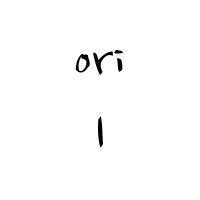
<style>
.page{position:relative;width:200px;height:200px;background:#ffffff}
.page>*{position:absolute;margin:0}
.t1{font:60px/72px "NanumBrush";color:#010000}
</style>
<div class="page">
<p class="t1" style="left:75px;top:50px;width:48px;height:98px;text-align:center">ori<br>1</p>
</div>
